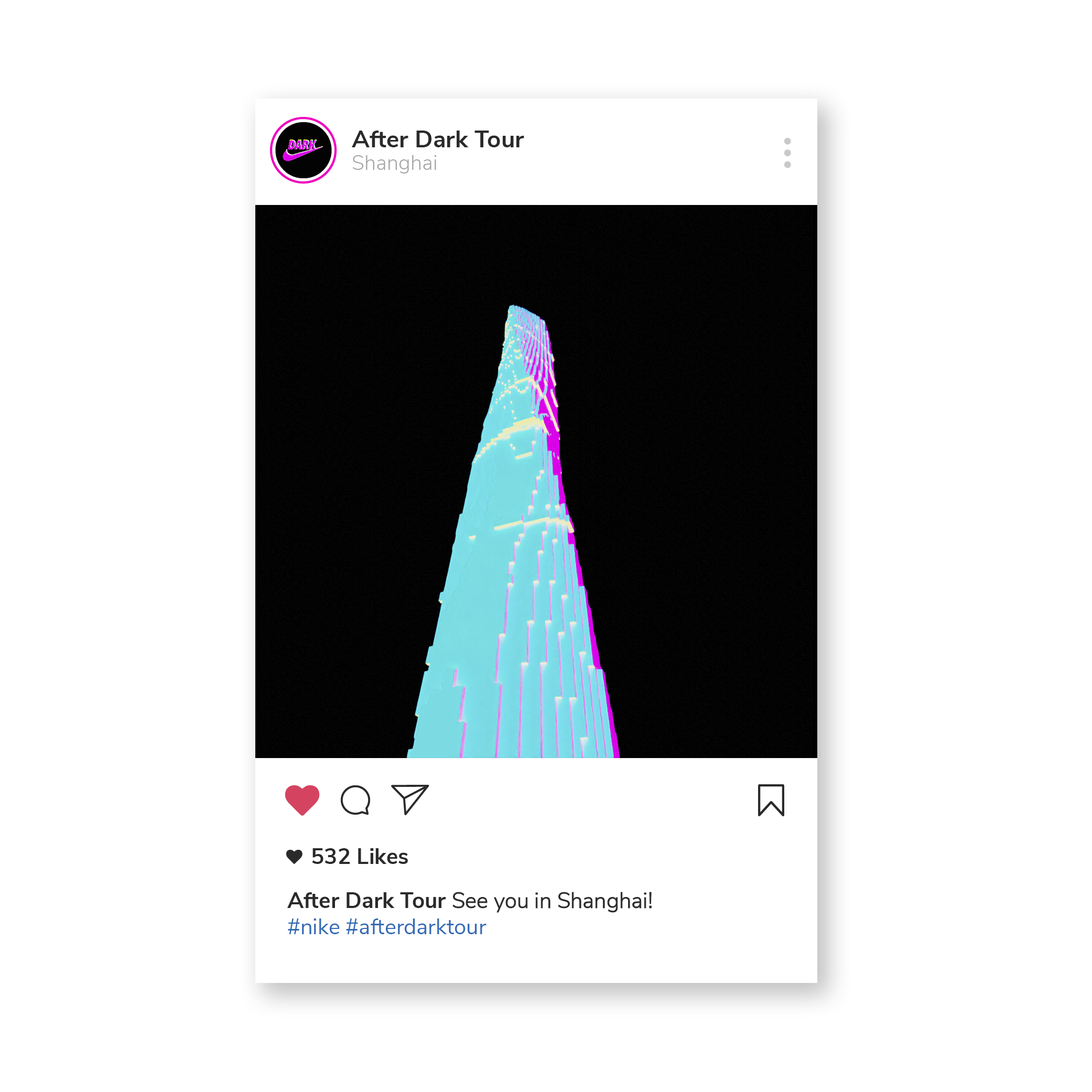
<style>
.page{position:relative;width:1092px;height:1092px;background:#ffffff}
.page>*{position:absolute;margin:0}
.t1{font:24px "NunitoSans-Bold";color:#2a2a2a}
.t2{font:20.7px "NunitoSans-Light";color:#a5a5a5}
.t3{font:22.1px "NunitoSans-Bold";color:#2a2a2a}
.t4{font:21.9px "NunitoSans-Light";color:#2a2a2a}
.t5{font:21.9px "NunitoSans-Regular";color:#356bb4}
</style>
<div class="page">
<p class="t1" style="left:352px;top:131px;width:172px;height:16px">After Dark Tour</p>
<p class="t2" style="left:352px;top:155px;width:84px;height:19px">Shanghai</p>
<p class="t3" style="left:312px;top:848px;width:96px;height:16px">532 Likes</p>
<p class="t4" style="left:287px;top:892px;width:365px;height:42px"><span class="t3">After Dark Tour </span>See you in Shanghai!<br><span class="t5">#nike #afterdarktour</span></p>
</div>
